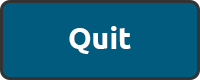
<style>
.page{position:relative;width:200px;height:80px;background:#005b7f}
.page>*{position:absolute;margin:0}
.t1{font:30px "Ubuntu-Bold";color:#ffffff}
</style>
<div class="page">
<p class="t1" style="left:69px;top:26px;width:62px;height:28px">Quit</p>
</div>
